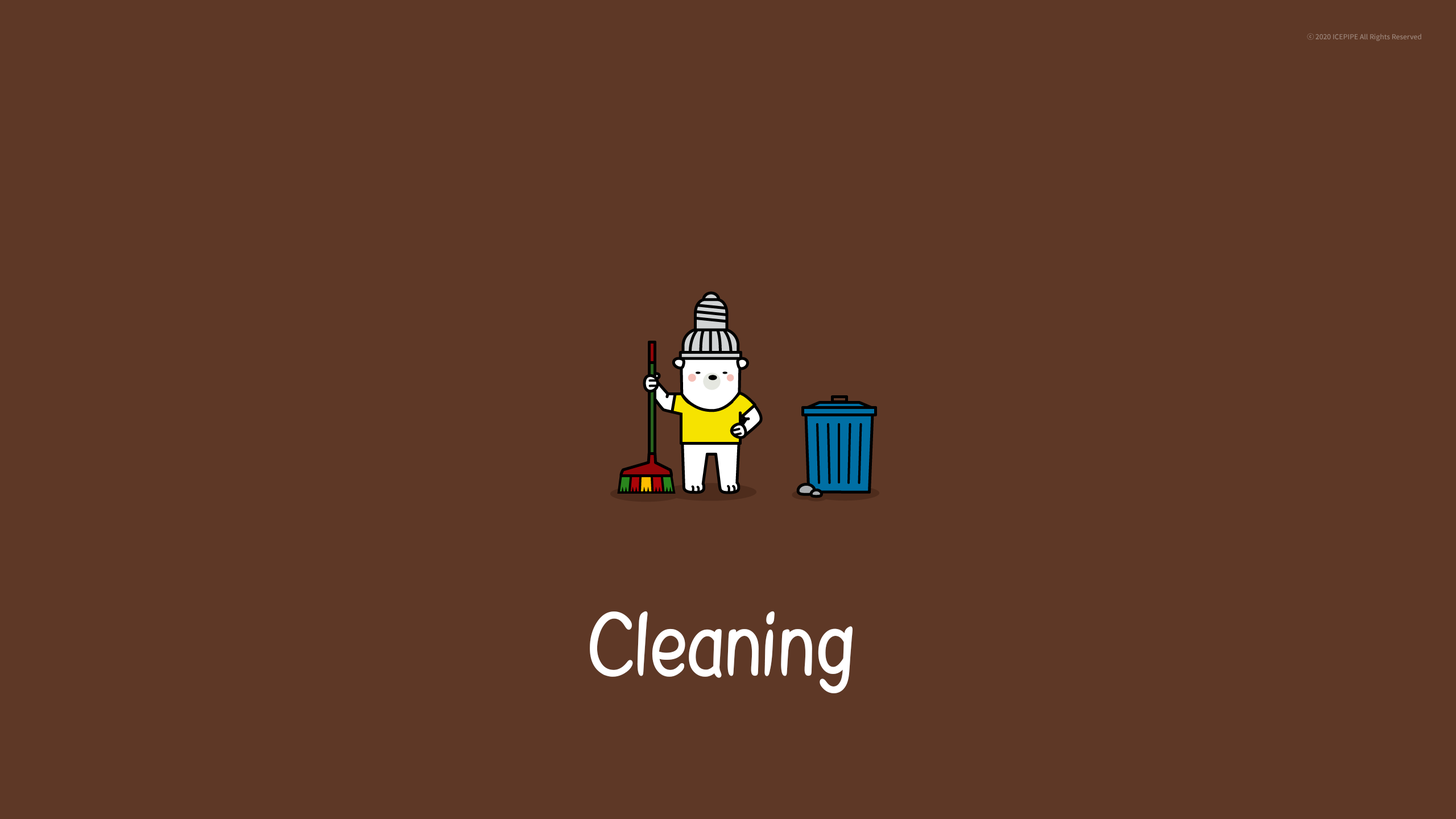
<style>
.page{position:relative;width:1456px;height:819px;background:#5e3826}
.page>*{position:absolute;margin:0}
.t1{font:87.5px "MDAlong";color:#ffffff;font-weight:bold;scale:0.81 1}
</style>
<div class="page">
<p class="t1" style="left:590px;top:611px;width:263px;height:82px">Cleaning</p>
</div>
